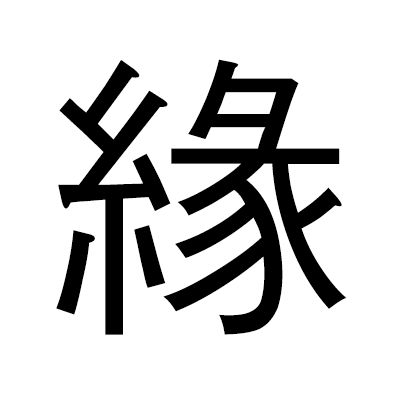
<style>
.page{position:relative;width:400px;height:400px;background:#ffffff}
.page>*{position:absolute;margin:0}
.t1{font:77.9px "Gulim";color:#000000}
</style>
<div class="page">
<p class="t1" style="left:56px;top:59px;width:291px;height:276px;text-align:center">緣</p>
</div>
